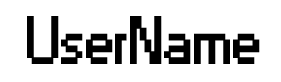
<style>
.page{position:relative;width:281px;height:82px;background:#ffffff}
.page>*{position:absolute;margin:0}
.t1{font:62.5px "Small Fonts";color:#000000;font-weight:bold}
</style>
<div class="page">
<p class="t1" style="left:27px;top:16px;width:233px;height:48px">UserName</p>
</div>
